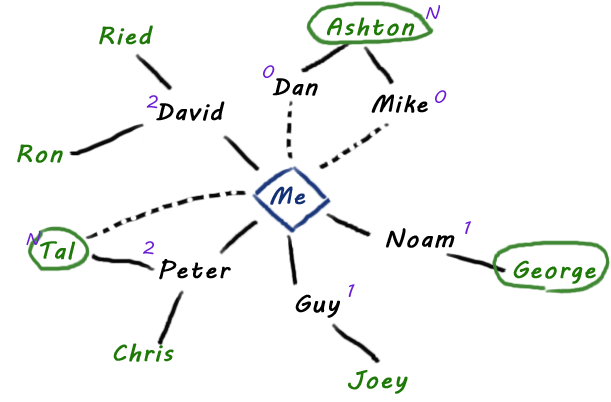
<style>
.page{position:relative;width:611px;height:402px;background:#ffffff}
.page>*{position:absolute;margin:0}
.t1{font:18px "MVBoli";letter-spacing:0.05em;color:#6b1dd4}
.t2{font:24px "MVBoli";letter-spacing:0.05em;color:#1e7909;font-weight:bold}
.t3{font:24px "MVBoli";letter-spacing:0.05em;color:#000000;font-weight:bold}
.t4{font:24px "MVBoli";letter-spacing:0.05em;color:#133176;font-weight:bold}
</style>
<div class="page">
<p class="t1" style="left:426px;top:5px;width:14px;height:15px">N</p>
<p class="t2" style="left:327px;top:17px;width:88px;height:19px">Ashton</p>
<p class="t2" style="left:99px;top:25px;width:54px;height:20px">Ried</p>
<p class="t1" style="left:263px;top:65px;width:12px;height:13px">0</p>
<p class="t3" style="left:272px;top:78px;width:46px;height:18px">Dan</p>
<p class="t1" style="left:146px;top:95px;width:12px;height:14px">2</p>
<p class="t3" style="left:156px;top:101px;width:69px;height:20px">David</p>
<p class="t3" style="left:371px;top:94px;width:57px;height:19px">Mike</p>
<p class="t1" style="left:435px;top:90px;width:12px;height:13px">0</p>
<p class="t2" style="left:17px;top:144px;width:46px;height:19px">Ron</p>
<p class="t4" style="left:270px;top:186px;width:36px;height:19px">Me</p>
<p class="t1" style="left:465px;top:221px;width:6px;height:13px">1</p>
<p class="t1" style="left:26px;top:231px;width:15px;height:15px">N</p>
<p class="t3" style="left:386px;top:228px;width:69px;height:20px">Noam</p>
<p class="t2" style="left:40px;top:241px;width:36px;height:19px">Tal</p>
<p class="t1" style="left:143px;top:241px;width:11px;height:14px">2</p>
<p class="t3" style="left:159px;top:259px;width:72px;height:21px">Peter</p>
<p class="t2" style="left:513px;top:260px;width:83px;height:24px">George</p>
<p class="t3" style="left:295px;top:294px;width:45px;height:24px">Guy</p>
<p class="t1" style="left:348px;top:284px;width:7px;height:13px">1</p>
<p class="t2" style="left:113px;top:343px;width:61px;height:19px">Chris</p>
<p class="t2" style="left:348px;top:370px;width:60px;height:24px">Joey</p>
</div>
